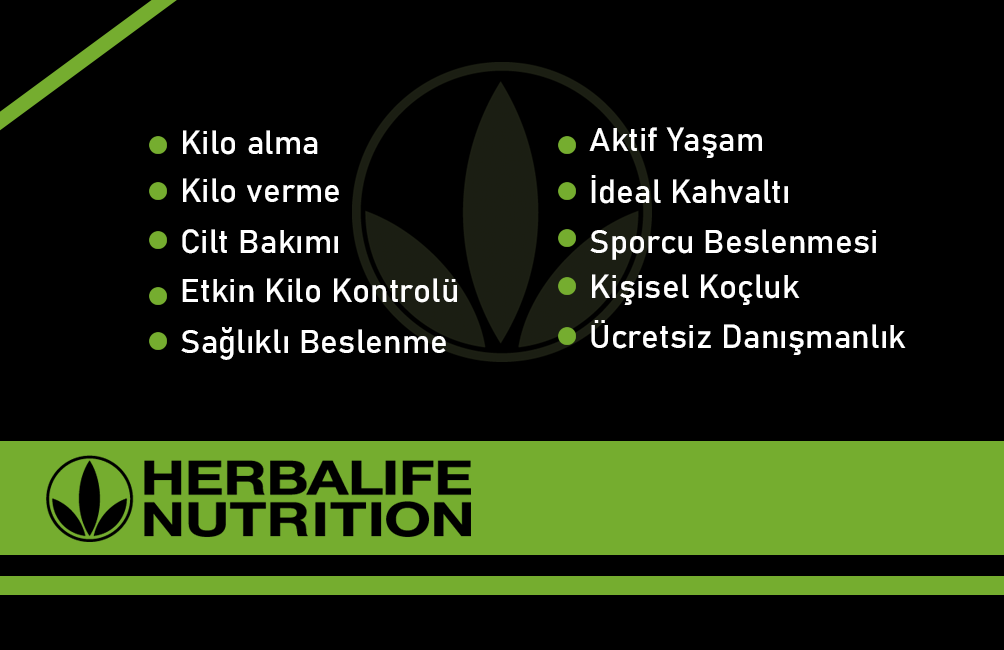
<style>
.page{position:relative;width:1004px;height:650px;background:#000000}
.page>*{position:absolute;margin:0}
.t1{font:33.3px "Bahnschrift";color:#ffffff}
</style>
<div class="page">
<p class="t1" style="left:183px;top:130px;width:135px;height:25px">Kilo alma</p>
<p class="t1" style="left:589px;top:127px;width:173px;height:31px">Aktif Yaşam</p>
<p class="t1" style="left:183px;top:178px;width:156px;height:25px">Kilo verme</p>
<p class="t1" style="left:591px;top:175px;width:197px;height:29px">İdeal Kahvaltı</p>
<p class="t1" style="left:182px;top:229px;width:156px;height:25px">Cilt Bakımı</p>
<p class="t1" style="left:590px;top:229px;width:286px;height:31px">Sporcu Beslenmesi</p>
<p class="t1" style="left:182px;top:278px;width:275px;height:25px">Etkin Kilo Kontrolü</p>
<p class="t1" style="left:592px;top:274px;width:208px;height:31px">Kişisel Koçluk</p>
<p class="t1" style="left:181px;top:327px;width:265px;height:33px">Sağlıklı Beslenme</p>
<p class="t1" style="left:591px;top:320px;width:315px;height:35px">Ücretsiz Danışmanlık</p>
</div>
